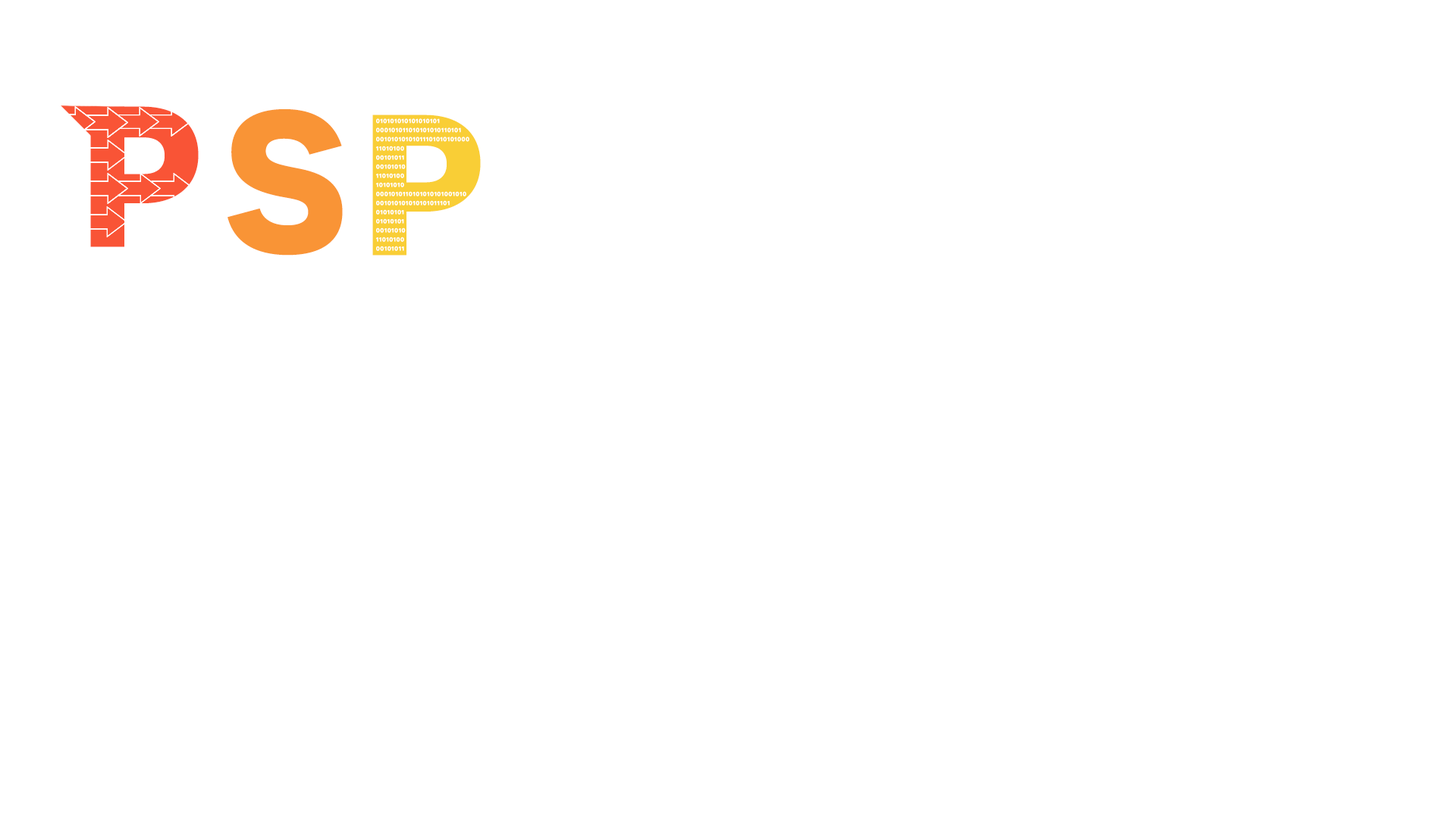
<style>
.page{position:relative;width:1456px;height:819px;background:#ffffff}
.page>*{position:absolute;margin:0}
.t1{font:200.2px "Novecentosanswide-Bold";color:#f95436}
.t2{font:200.2px "Novecentosanswide-Bold";color:#f99436}
.t3{font:200.2px "Novecentosanswide-Bold";color:#f9ce36}
</style>
<div class="page">
<p class="t1" style="left:90px;top:106px;width:109px;height:141px">P</p>
<p class="t2" style="left:227px;top:109px;width:116px;height:147px">S</p>
<p class="t3" style="left:372px;top:115px;width:109px;height:141px">P</p>
</div>
